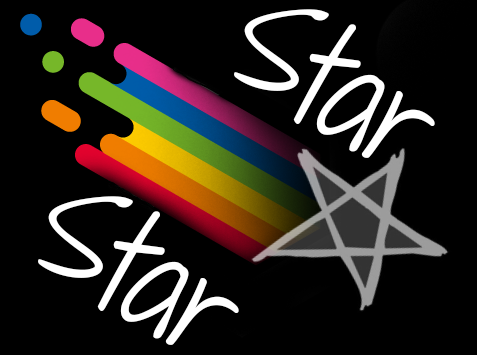
<style>
.page{position:relative;width:477px;height:355px;background:#000000}
.page>*{position:absolute;margin:0}
.t1{font:107.3px "ShadowsIntoLight";color:#ffffff}
</style>
<div class="page">
<p class="t1" style="left:234px;top:9px;width:201px;height:149px;rotate:31deg">Star</p>
<p class="t1" style="left:38px;top:196px;width:201px;height:149px;rotate:31deg">Star</p>
</div>
